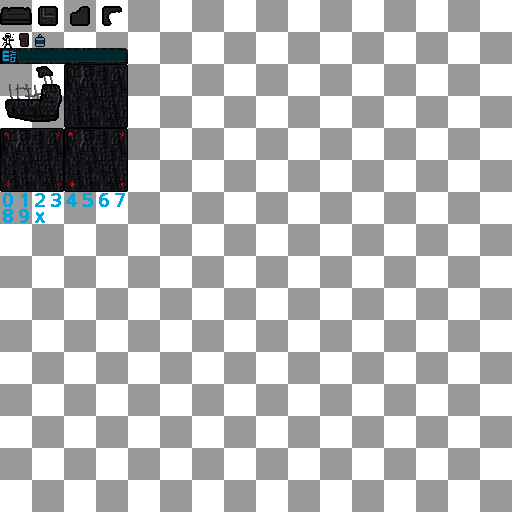
<style>
.page{position:relative;width:512px;height:512px;background:#999999}
.page>*{position:absolute;margin:0}
.t1{font:18px "DroidSansMono";color:#06a4df;font-weight:bold}
</style>
<div class="page">
<p class="t1" style="left:3px;top:193px;width:10px;height:14px">0</p>
<p class="t1" style="left:21px;top:193px;width:6px;height:14px">1</p>
<p class="t1" style="left:35px;top:193px;width:10px;height:14px">2</p>
<p class="t1" style="left:51px;top:193px;width:10px;height:14px">3</p>
<p class="t1" style="left:66px;top:193px;width:11px;height:14px">4</p>
<p class="t1" style="left:83px;top:193px;width:10px;height:14px">5</p>
<p class="t1" style="left:99px;top:193px;width:10px;height:14px">6</p>
<p class="t1" style="left:115px;top:193px;width:10px;height:14px">7</p>
<p class="t1" style="left:3px;top:209px;width:10px;height:14px">8</p>
<p class="t1" style="left:19px;top:209px;width:10px;height:14px">9</p>
<p class="t1" style="left:35px;top:212px;width:10px;height:11px">x</p>
</div>
